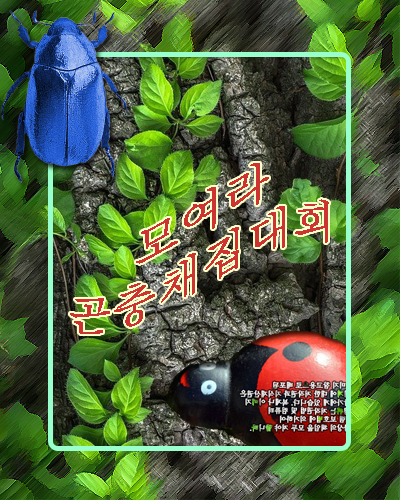
<style>
.page{position:relative;width:400px;height:500px}
.page>*{position:absolute;margin:0}
.t1{font:45px "Batang";color:#cc3333;scale:1.06 1}
</style>
<div class="page">
<p class="t1" style="left:70px;top:163px;width:259px;height:171px;text-align:center;rotate:-19deg">모여라<br>곤충채집대회</p>
</div>
